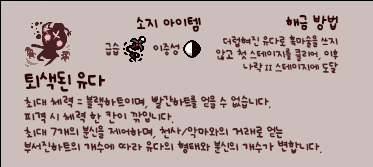
<style>
.page{position:relative;width:373px;height:167px;background:#ccbebb}
.page>*{position:absolute;margin:0}
.t1{font:12px "UhBeeSe_hyunBold";color:#2e0304}
.t2{font:12px "UhBeeSe_hyunBold";letter-spacing:-0.1em;color:#2e0304}
.t3{font:12px "UhBeeSe_hyunBold";letter-spacing:-0.15em;color:#2e0304}
.t4{font:9px/13px "UhBeeSe_hyunBold";letter-spacing:-0.025em;color:#4b1c1c}
.t5{font:9px/13px "UhBeeSe_hyunBold";letter-spacing:-0.05em;color:#4b1c1c}
.t6{font:9px/13px "Font_soulsV2_Title-Regular";letter-spacing:-0.05em;color:#4b1c1c}
.t7{font:10px "UhBeeSe_hyun";color:#4b1c1c}
.t8{font:10px "UhBeeSe_hyunBold";color:#4b1c1c}
.t9{font:10px/15px "UhBeeSe_hyunBold";letter-spacing:-0.025em;color:#4b1c1c}
.t10{font:15.2px/24px "UhBeeSe_hyunBold";letter-spacing:-0.1em;color:#2e0304;scale:1.05 1}
.t11{font:16px/24px "UhBeeSe_hyunBold";letter-spacing:-0.05em;color:#2e0304}
.t12{font:16px/24px "UhBeeSe_hyunBold";letter-spacing:-0.025em;color:#2e0304}
.t13{font:10px/15px "UhBeeSe_hyunBold";letter-spacing:-0.15em;color:#4b1c1c}
</style>
<div class="page">
<p class="t1" style="left:136px;top:16px;width:65px;height:16px"><span class="t2">소</span>지 아이템</p>
<p class="t1" style="left:285px;top:14px;width:53px;height:17px">해금 방<span class="t3">법</span></p>
<p class="t4" style="left:215px;top:34px;width:123px;height:40px;text-align:right">더럽혀진 유다로 흑마술을 쓰지<br>않고 첫 스테이지를 클리어, 이후<br><span class="t5">나락</span><span class="t6"> II</span><span class="t5"> 스테이지에 도달</span></p>
<p class="t7" style="left:105px;top:42px;width:15px;height:14px">급<span class="t8">습</span></p>
<p class="t8" style="left:153px;top:43px;width:27px;height:13px">이중성</p>
<p class="t9" style="left:24px;top:71px;width:298px;height:83px"><span class="t10">토</span><span class="t11">ㅣ</span><span class="t12">색</span><span class="t11">된 유다<br></span>최대 체력 = 블랙하트이며, <span class="t13">빨간하트</span>를 얻을 수 없습니다.<br>피격 시 체력 한 칸이 깎입니다.<br>최대 7개의 분신을 제어하며, 천사/악마와의 거래로 얻는<br>부서진하트의 개수에 따라 유다의 형태와 분신의 개수가 변합니다.</p>
</div>
